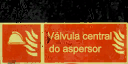
<style>
.page{position:relative;width:128px;height:64px}
.page>*{position:absolute;margin:0}
.t1{font:10.3px "ArialMT";letter-spacing:-0.015em;color:#dec363}
</style>
<div class="page">
<p class="t1" style="left:47px;top:32px;width:65px;height:8px">Válvula central</p>
<p class="t1" style="left:49px;top:44px;width:53px;height:11px">do aspersor</p>
</div>
